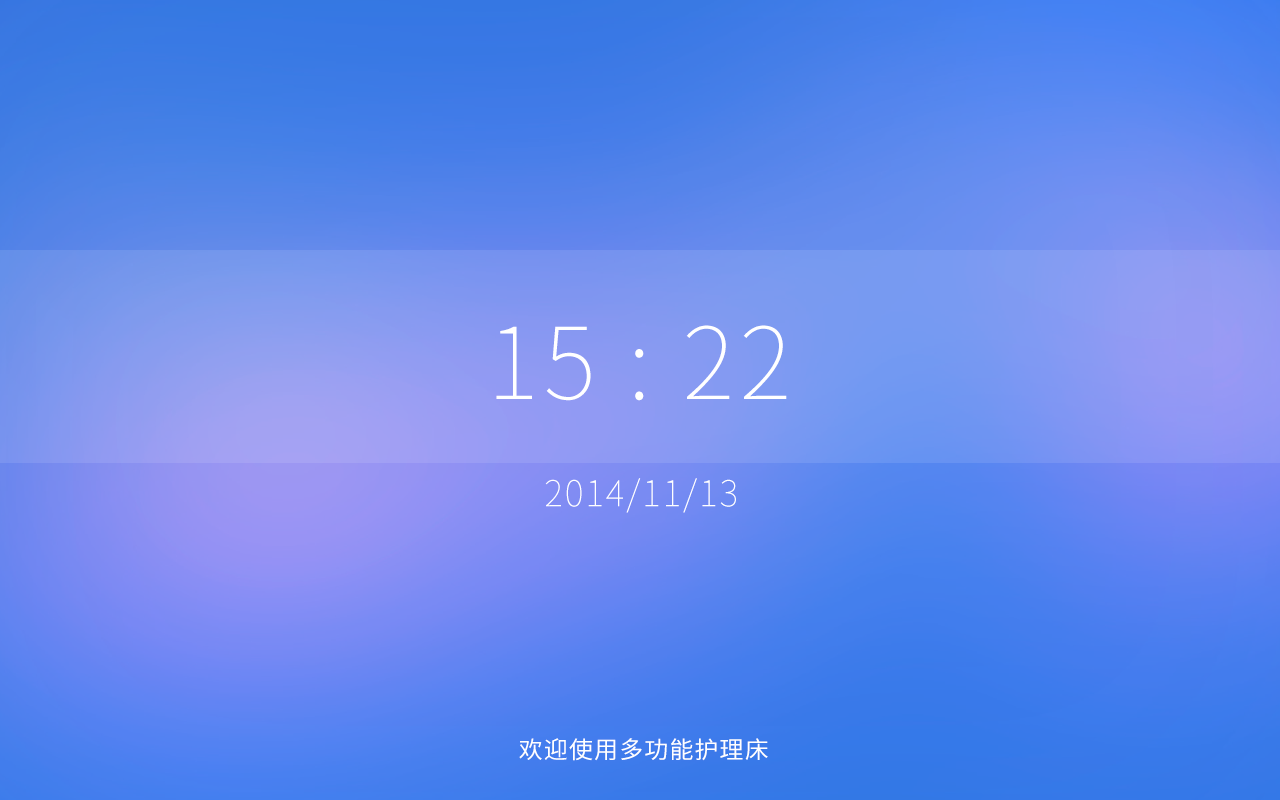
<style>
.page{position:relative;width:1280px;height:800px}
.page>*{position:absolute;margin:0}
.t1{font:99.6px "SourceHanSansCN-ExtraLight";letter-spacing:0.05em;color:#ffffff}
.t2{font:35.9px "SourceHanSansCN-ExtraLight";letter-spacing:0.05em;color:#ffffff}
.t3{font:23.9px "SourceHanSansCN-Regular";letter-spacing:0.05em;color:#ffffff}
</style>
<div class="page">
<p class="t1" style="left:496px;top:325px;width:291px;height:76px">15 : 22</p>
<p class="t2" style="left:545px;top:478px;width:191px;height:35px">2014/11/13</p>
<p class="t3" style="left:519px;top:738px;width:249px;height:23px">欢迎使用多功能护理床</p>
</div>
